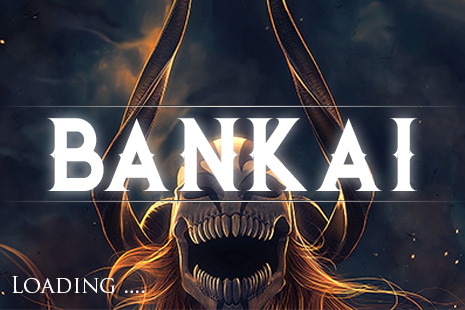
<style>
.page{position:relative;width:465px;height:310px}
.page>*{position:absolute;margin:0}
.t1{font:92.7px "JibrilRegular";color:#ffffff;scale:0.92 1}
.t2{font:22.4px "TrajanPro-Regular";color:#ffffff}
</style>
<div class="page">
<p class="t1" style="left:47px;top:118px;width:370px;height:73px">BANKAI</p>
<p class="t2" style="left:12px;top:276px;width:133px;height:17px">Loading ....</p>
</div>
